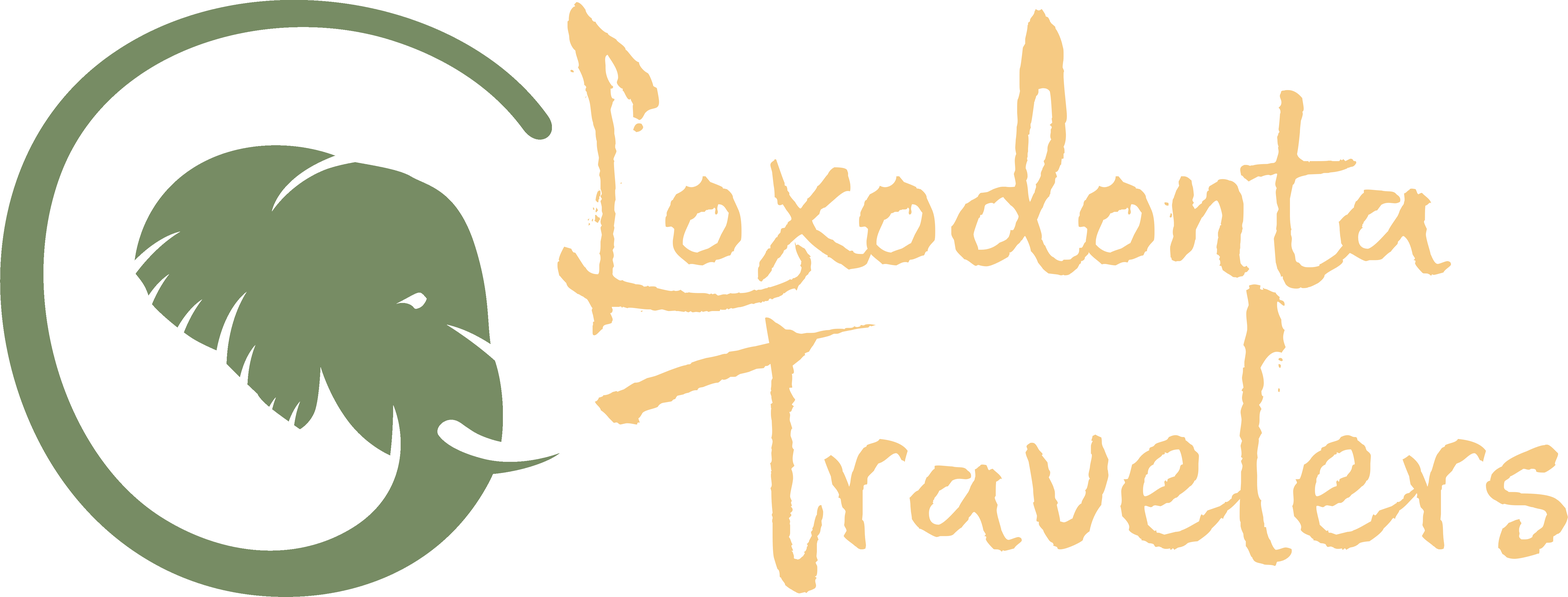
<style>
.page{position:relative;width:1568px;height:597px;background:#ffffff}
.page>*{position:absolute;margin:0}
.t1{font:417.9px "WildPen-1";color:#f6ca83}
.t2{font:473.6px "WildPen-1";color:#f6ca83}
</style>
<div class="page">
<p class="t1" style="left:557px;top:2px;width:254px;height:333px">L</p>
<p class="t2" style="left:665px;top:9px;width:786px;height:280px">oxodonta</p>
<p class="t2" style="left:824px;top:284px;width:744px;height:282px">ravelers</p>
<p class="t1" style="left:595px;top:317px;width:281px;height:276px">T</p>
</div>
